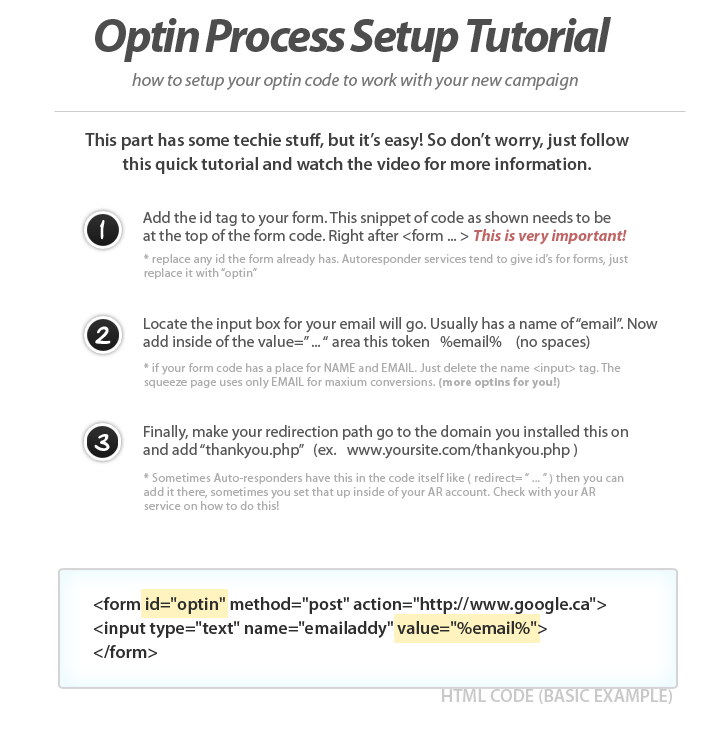
<style>
.page{position:relative;width:728px;height:729px;background:#ffffff}
.page>*{position:absolute;margin:0}
.t1{font:48px "MyriadPro-BoldIt";letter-spacing:-0.05em;color:#4d4d4d}
.t2{font:18px "MyriadPro-It";color:#777777}
.t3{font:18px/24px "MyriadPro-Semibold";color:#404040}
.t4{font:16px/18px "MyriadPro-Regular";color:#575757}
.t5{font:16px/18px "MyriadPro-BoldIt";color:#575757}
.t6{font:12px/14px "MyriadPro-Regular";letter-spacing:0.025em;color:#adadad}
.t7{font:12px/14px "MyriadPro-Bold";letter-spacing:0.025em;color:#adadad}
.t8{font:18px/24px "MyriadPro-Semibold";color:#2e2e2e}
.t9{font:18px "MyriadPro-Semibold";color:#c9c9c9}
</style>
<div class="page">
<p class="t1" style="left:95px;top:17px;width:516px;height:45px">Optin Process Setup Tutorial</p>
<p class="t2" style="left:132px;top:73px;width:446px;height:17px">how to setup your optin code to work with your new campaign</p>
<p class="t3" style="left:85px;top:132px;width:544px;height:42px;text-align:center">This part has some techie stuff, but it’s easy! So don’t worry, just follow<br>this quick tutorial and watch the video for more information.</p>
<p class="t4" style="left:143px;top:211px;width:484px;height:34px">Add the id tag to your form. This snippet of code as shown needs to be<br>at the top of the form code. Right after &lt;form ... &gt; <span class="t5">This is very important!</span></p>
<p class="t6" style="left:144px;top:253px;width:484px;height:26px">* replace any id the form already has. Autoresponder services tend to give id’s for forms, just<br>replace it with “optin”</p>
<p class="t4" style="left:143px;top:317px;width:515px;height:33px">Locate the input box for your email will go. Usually has a name of “email”. Now<br>add inside of the value=” ... “ area this token   %email%    (no spaces)</p>
<p class="t6" style="left:144px;top:363px;width:477px;height:26px">* if your form code has a place for NAME and EMAIL. Just delete the name &lt;input&gt; tag. The<br>squeeze page uses only EMAIL for maxium conversions. <span class="t7">(more optins for you!)</span></p>
<p class="t4" style="left:143px;top:425px;width:485px;height:34px">Finally, make your redirection path go to the domain you installed this on<br>and add “thankyou.php”   (ex.   www.yoursite.com/thankyou.php )</p>
<p class="t6" style="left:144px;top:472px;width:480px;height:38px">* Sometimes Auto-responders have this in the code itself like ( redirect= “ ... ” ) then you can<br>add it there, sometimes you set that up inside of your AR account. Check with your AR<br>service on how to do this!</p>
<p class="t8" style="left:94px;top:597px;width:512px;height:61px">&lt;form id="optin" method="post" action="http://www.google.ca"&gt;<br>&lt;input type="text" name="emailaddy" value="%email%"&gt; <br>&lt;/form&gt;</p>
<p class="t9" style="left:442px;top:689px;width:230px;height:15px">HTML CODE (BASIC EXAMPLE)</p>
</div>
